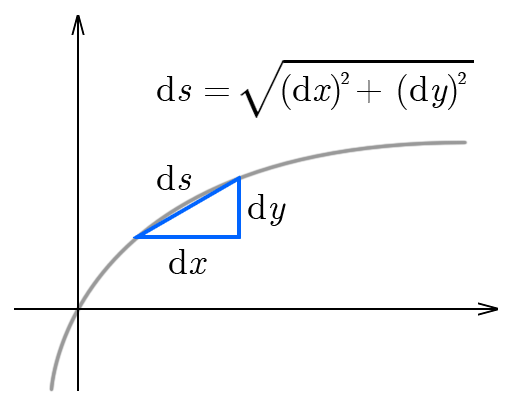
<style>
.page{position:relative;width:510px;height:403px;background:#ffffff}
.page>*{position:absolute;margin:0}
.t1{font:36px "CMUSerif-Roman";color:#000000}
.t2{font:36px "CMUSerif-Italic";color:#000000}
.t3{font:18px "CMUSerif-Roman";color:#000000}
</style>
<div class="page">
<p class="t1" style="left:157px;top:74px;width:300px;height:36px">d<span class="t2">s</span> =    (d<span class="t2">x</span>) + (d<span class="t2">y</span>)</p>
<p class="t3" style="left:341px;top:72px;width:8px;height:12px">2</p>
<p class="t3" style="left:458px;top:72px;width:8px;height:12px">2</p>
<p class="t1" style="left:157px;top:165px;width:35px;height:25px">d<span class="t2">s</span></p>
<p class="t1" style="left:248px;top:194px;width:38px;height:32px">d<span class="t2">y</span></p>
<p class="t1" style="left:169px;top:249px;width:38px;height:25px">d<span class="t2">x</span></p>
</div>
